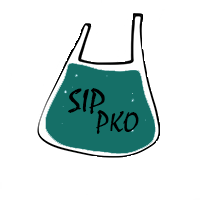
<style>
.page{position:relative;width:200px;height:200px;background:#ffffff}
.page>*{position:absolute;margin:0}
.t1{font:32.8px "Mistral";color:#000000;scale:1.16 1}
.t2{font:30px "Mistral";color:#000000}
</style>
<div class="page">
<p class="t1" style="left:68px;top:88px;width:37px;height:26px">SIP</p>
<p class="t2" style="left:96px;top:110px;width:43px;height:24px">PKO</p>
</div>
